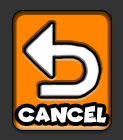
<style>
.page{position:relative;width:123px;height:140px;background:#333333}
.page>*{position:absolute;margin:0}
.t1{font:21.1px "Funhouse";color:#ffffff}
</style>
<div class="page">
<p class="t1" style="left:18px;top:105px;width:88px;height:18px">CANCEL</p>
</div>
